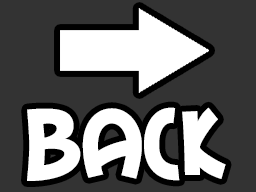
<style>
.page{position:relative;width:256px;height:192px;background:#333333}
.page>*{position:absolute;margin:0}
.t1{font:96px "MailRayStuff-Regular";color:#ffffff}
</style>
<div class="page">
<p class="t1" style="left:27px;top:107px;width:199px;height:74px">Back</p>
</div>
